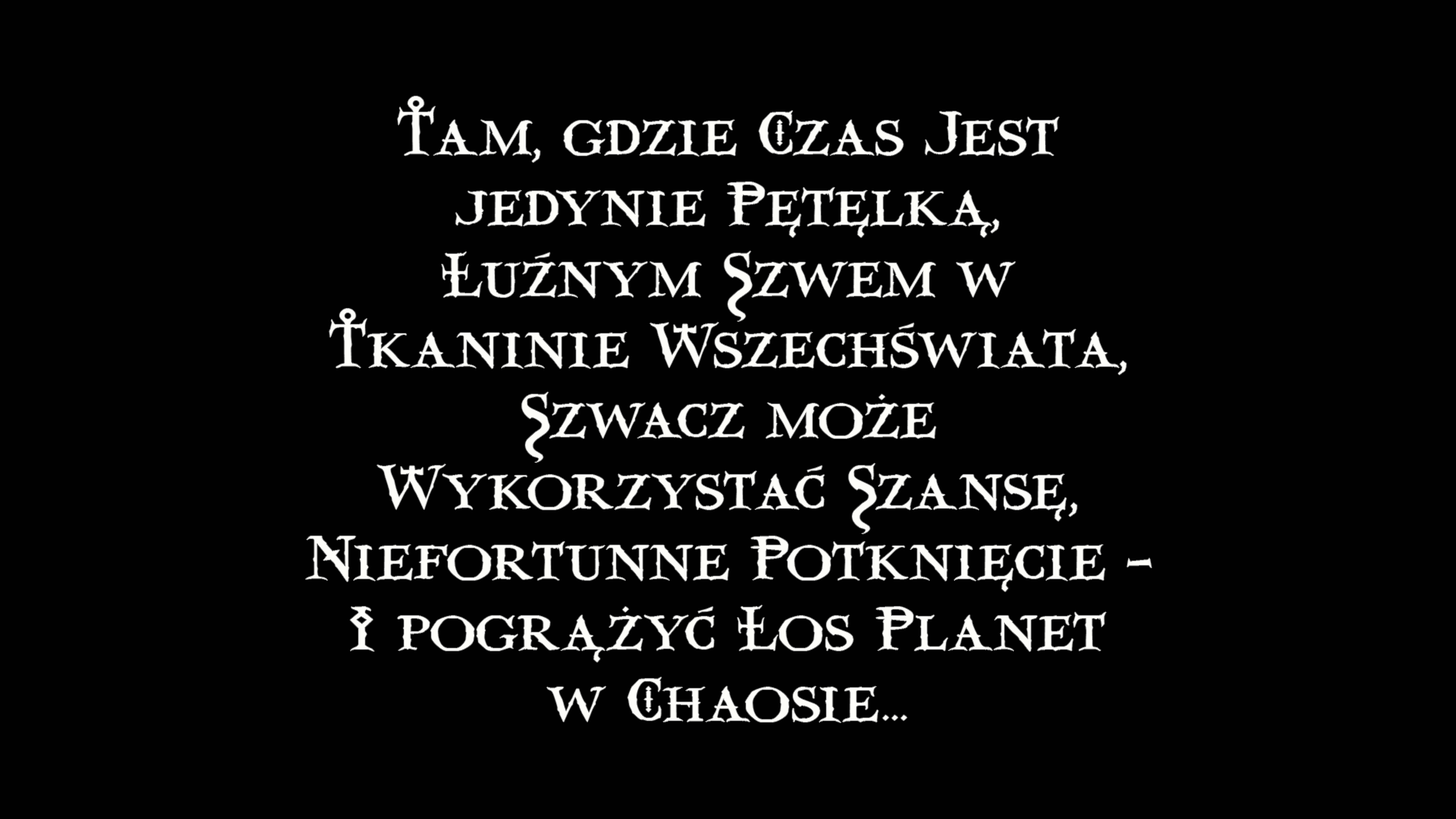
<style>
.page{position:relative;width:1456px;height:819px;background:#010101}
.page>*{position:absolute;margin:0}
.t1{font:52.6px/70.8px "Valdemar";letter-spacing:0.04em;color:#fdfdf9;scale:1.1 1}
.t2{font:52.6px "Valdemar";letter-spacing:0.04em;color:#fdfdf9;scale:1.1 1}
</style>
<div class="page">
<p class="t1" style="left:306px;top:96px;width:846px;height:627px;text-align:center">Tam, gdzie Czas Ôest<br>jedynie Petelka,<br>Luznym Szwem w<br>Tkaninie Wszechswiata,<br>Szwacz moze<br>Wykorzystac Szanse,<br>Niefortunne Potkniecie -<br>I pograzyc Los Planet<br>w Chaosie...</p>
<p class="t2" style="left:789px;top:224px;width:9px;height:13px;rotate:180deg">,</p>
<p class="t2" style="left:858px;top:224px;width:8px;height:13px;rotate:180deg">,</p>
<p class="t2" style="left:981px;top:224px;width:8px;height:13px;rotate:180deg">,</p>
<p class="t2" style="left:879px;top:394px;width:6px;height:6px">.</p>
<p class="t2" style="left:1055px;top:507px;width:8px;height:14px;rotate:180deg">,</p>
<p class="t2" style="left:1002px;top:578px;width:8px;height:13px;rotate:180deg">,</p>
<p class="t2" style="left:623px;top:607px;width:6px;height:5px">.</p>
<p class="t2" style="left:594px;top:648px;width:8px;height:14px;rotate:180deg">,</p>
</div>
